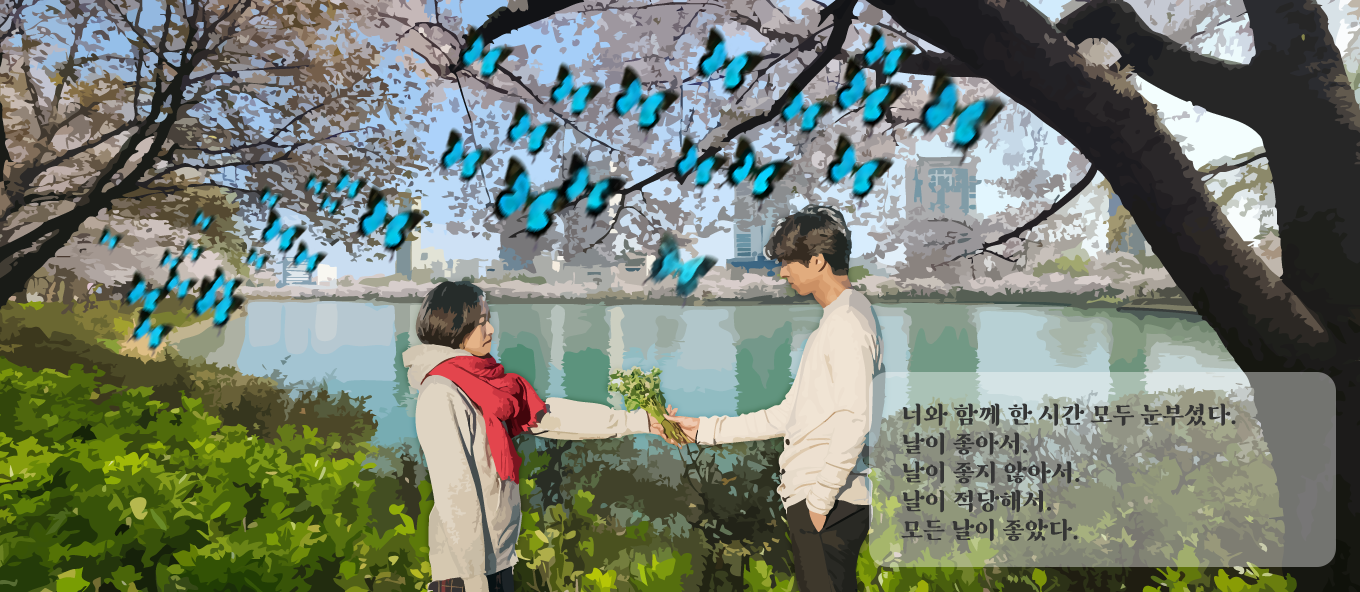
<style>
.page{position:relative;width:1360px;height:592px}
.page>*{position:absolute;margin:0}
.t1{font:24px "SF_HambakSnow";color:#353535}
</style>
<div class="page">
<p class="t1" style="left:901px;top:403px;width:335px;height:138px">너와 함께 한 시간 모두 눈부셨다.<br>날이 좋아서.<br>날이 좋지 않아서.<br>날이 적당해서.<br>모든 날이 좋았다.</p>
</div>
